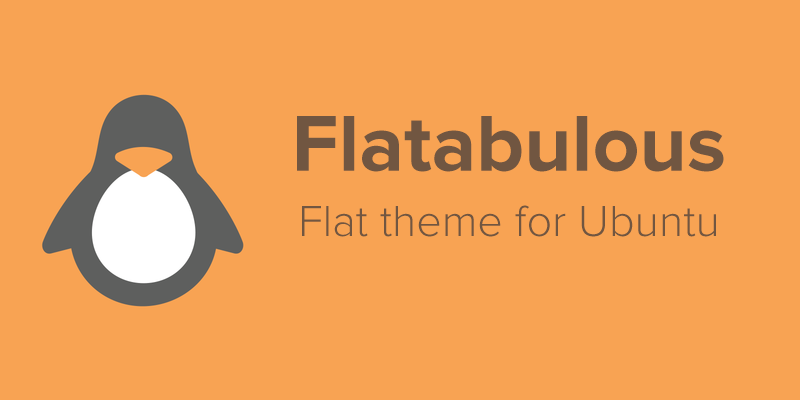
<style>
.page{position:relative;width:800px;height:400px;background:#f8a353}
.page>*{position:absolute;margin:0}
.t1{font:82px "ProximaNova-Bold";color:#715641}
.t2{font:45px "ProximaNova-Light";color:#715641}
</style>
<div class="page">
<p class="t1" style="left:297px;top:116px;width:427px;height:56px">Flatabulous</p>
<p class="t2" style="left:302px;top:205px;width:414px;height:32px">Flat theme for Ubuntu</p>
</div>
